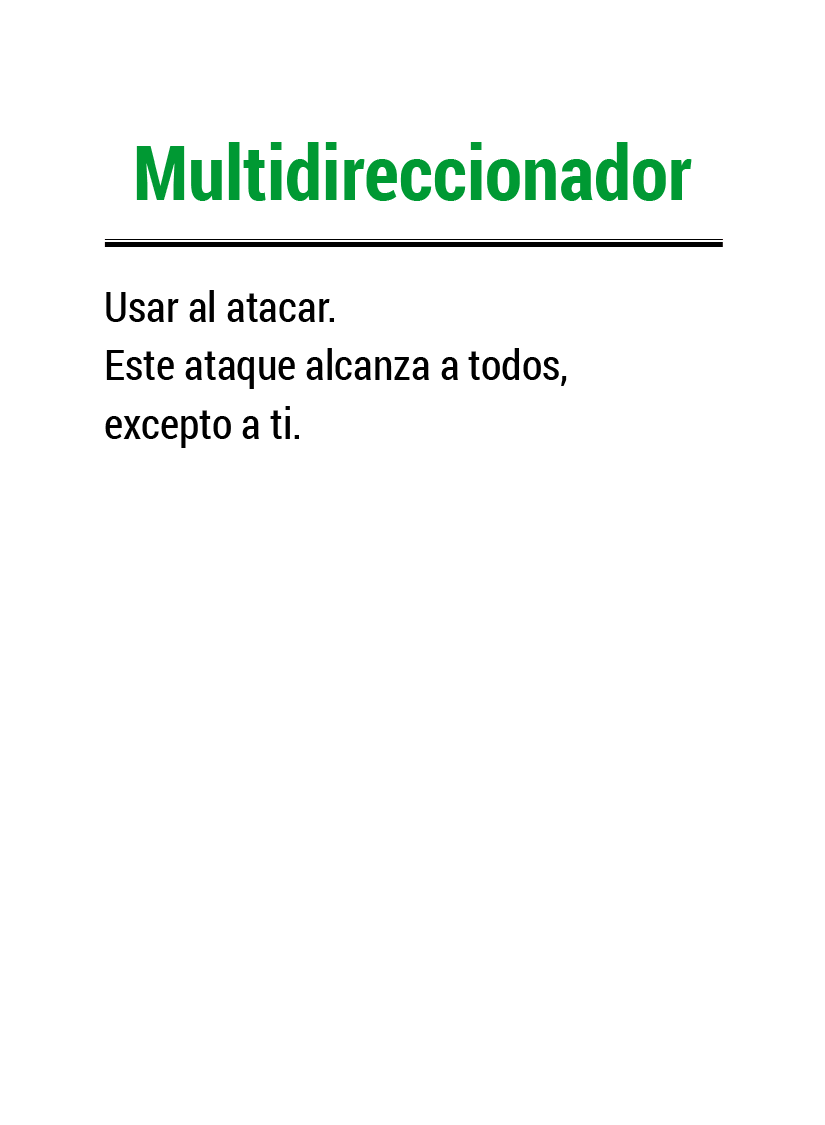
<style>
.page{position:relative;width:825px;height:1125px;background:#ffffff}
.page>*{position:absolute;margin:0}
.t1{font:76px "RobotoCondensed-Bold";color:#009933}
.t2{font:42px "RobotoCondensed-Regular";color:#000000}
</style>
<div class="page">
<p class="t1" style="left:136px;top:142px;width:556px;height:59px">Multidireccionador</p>
<p class="t2" style="left:105px;top:290px;width:462px;height:158px">Usar al atacar.<br>Este ataque alcanza a todos, <br>excepto a ti.</p>
</div>
